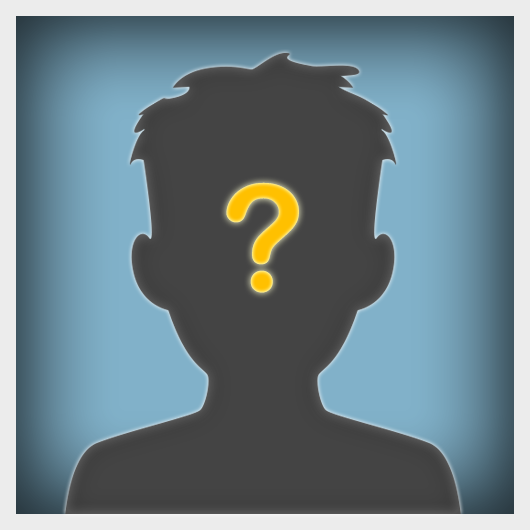
<style>
.page{position:relative;width:530px;height:530px;background:#444444}
.page>*{position:absolute;margin:0}
.t1{font:148px "ArialRoundedMTBold"}
</style>
<div class="page">
<p class="t1" style="left:226px;top:182px;width:73px;height:111px">?</p>
</div>
